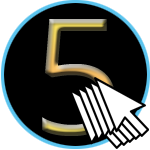
<style>
.page{position:relative;width:150px;height:150px;background:#000000}
.page>*{position:absolute;margin:0}
.t1{font:161px "OpenSans"}
</style>
<div class="page">
<p class="t1" style="left:42px;top:19px;width:73px;height:117px">5</p>
</div>
